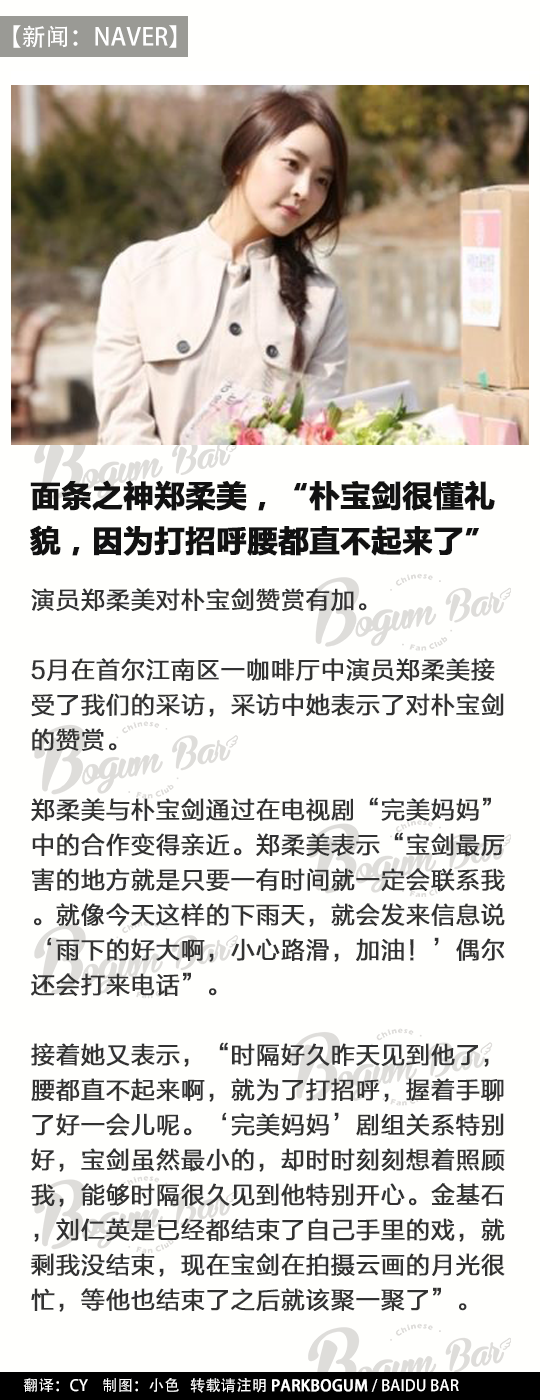
<style>
.page{position:relative;width:540px;height:1400px;background:#fffffd}
.page>*{position:absolute;margin:0}
.t1{font:24px "AdobeHeitiStd-Regular";color:#ffffff}
.t2{font:30px/45px "MicrosoftYaHei-Bold";color:#121212;font-weight:bold}
.t3{font:24px/35px "FZLTHJW--GB1-0";color:#333333;font-weight:bold}
.t4{font:15.4px "AdobeHeitiStd-Regular";color:#ffffff}
.t5{font:15.4px "AdobeHeitiStd-Regular";color:#ffffff;font-weight:bold}
</style>
<div class="page">
<p class="t1" style="left:13px;top:25px;width:164px;height:23px">【新闻：NAVER】</p>
<p class="t2" style="left:30px;top:480px;width:465px;height:76px">面条之神郑柔美，“朴宝剑很懂礼<br>貌，因为打招呼腰都直不起来了”</p>
<p class="t3" style="left:31px;top:588px;width:474px;height:724px">演员郑柔美对朴宝剑赞赏有加。<br><br>5月在首尔江南区一咖啡厅中演员郑柔美接受了我们的采访，采访中她表示了对朴宝剑的赞赏。<br><br>郑柔美与朴宝剑通过在电视剧“完美妈妈”中的合作变得亲近。郑柔美表示“宝剑最厉害的地方就是只要一有时间就一定会联系我。就像今天这样的下雨天，就会发来信息说‘雨下的好大啊，小心路滑，加油！’偶尔还会打来电话”。<br><br>接着她又表示，“时隔好久昨天见到他了，腰都直不起来啊，就为了打招呼，握着手聊了好一会儿呢。‘完美妈妈’剧组关系特别好，宝剑虽然最小的，却时时刻刻想着照顾我，能够时隔很久见到他特别开心。金基石，刘仁英是已经都结束了自己手里的戏，就剩我没结束，现在宝剑在拍摄云画的月光很忙，等他也结束了之后就该聚一聚了”。</p>
<p class="t4" style="left:23px;top:1378px;width:436px;height:15px">翻译：CY    制图：小色   转载请注明 <span class="t5">PARKBOGUM </span>/ BAIDU BAR</p>
</div>
